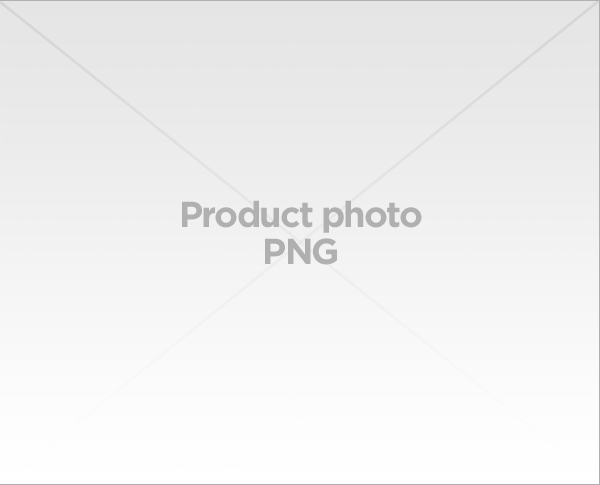
<style>
.page{position:relative;width:600px;height:485px}
.page>*{position:absolute;margin:0}
.t1{font:36.1px/37.5px "GothamBold";letter-spacing:-0.05em;color:#b1b0b0}
</style>
<div class="page">
<p class="t1" style="left:182px;top:200px;width:240px;height:65px;text-align:center">Product photo<br>PNG</p>
</div>
